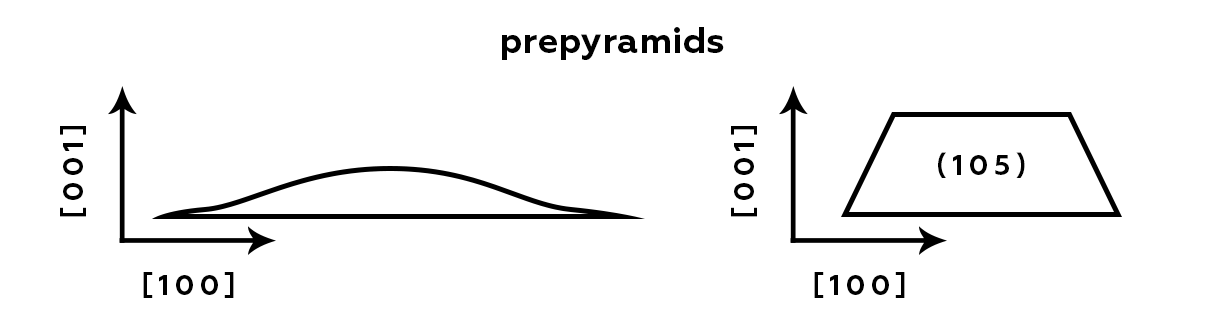
<style>
.page{position:relative;width:1209px;height:331px;background:#ffffff}
.page>*{position:absolute;margin:0}
.t1{font:36px "Geometria-Bold";color:#000000}
.t2{font:28px "Geometria-Bold";letter-spacing:0.19em;color:#000000;text-transform:uppercase}
</style>
<div class="page">
<p class="t1" style="left:502px;top:27px;width:222px;height:33px">prepyramids</p>
<p class="t2" style="left:60px;top:126px;width:26px;height:91px;rotate:-90deg">[001]</p>
<p class="t2" style="left:731px;top:126px;width:26px;height:91px;rotate:-90deg">[001]</p>
<p class="t2" style="left:938px;top:152px;width:87px;height:26px">(105)</p>
<p class="t2" style="left:143px;top:272px;width:91px;height:26px">[100]</p>
<p class="t2" style="left:814px;top:272px;width:91px;height:26px">[100]</p>
</div>
